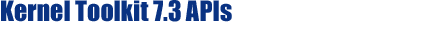
<style>
.page{position:relative;width:429px;height:29px;background:#ffffff}
.page>*{position:absolute;margin:0}
.t1{font:26px "Impact";color:#093282}
</style>
<div class="page">
<p class="t1" style="left:1px;top:0px;width:231px;height:22px">Kernel Toolkit 7.3 APIs</p>
</div>
